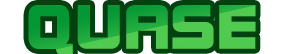
<style>
.page{position:relative;width:286px;height:54px;background:#004110}
.page>*{position:absolute;margin:0}
.t1{font:69.3px "DFSoGeiStd-W9";scale:0.92 1}
</style>
<div class="page">
<p class="t1" style="left:28px;top:5px;width:228px;height:50px">QUASE</p>
</div>
